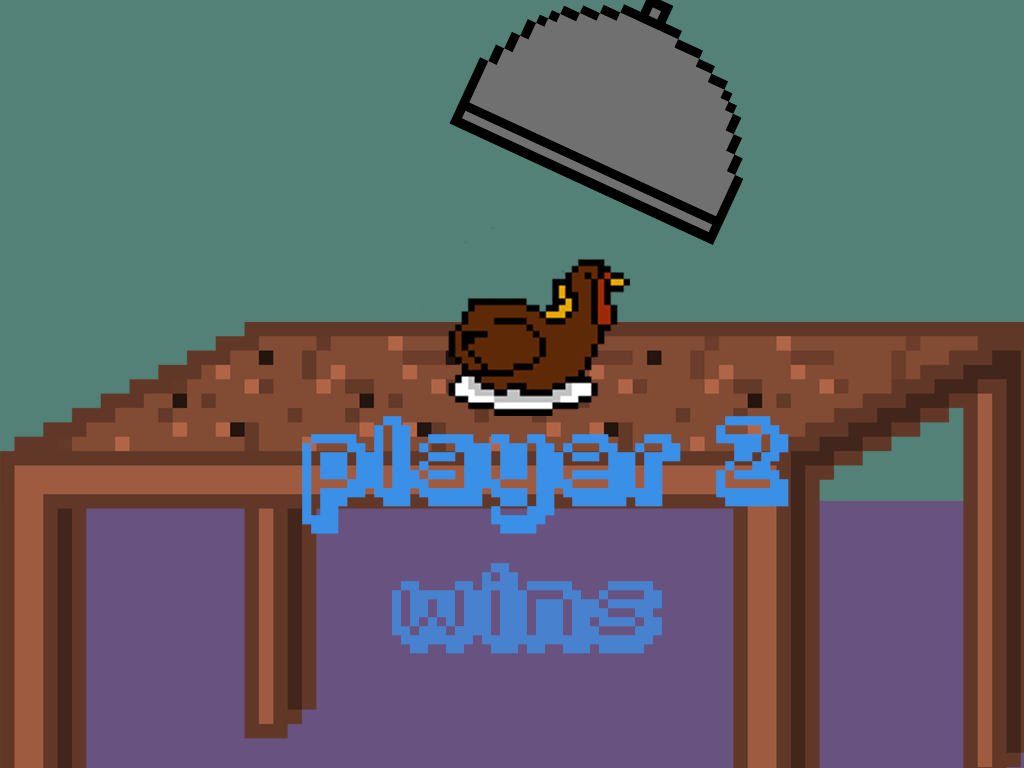
<style>
.page{position:relative;width:1024px;height:768px;background:#538077}
.page>*{position:absolute;margin:0}
.t1{font:72px "Fipps-Regular";color:#3a8fe6}
</style>
<div class="page">
<p class="t1" style="left:302px;top:416px;width:487px;height:118px">player 2</p>
<p class="t1" style="left:392px;top:563px;width:270px;height:91px;opacity:0.73">wins</p>
</div>
